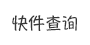
<style>
.page{position:relative;width:90px;height:45px;background:#ffffff}
.page>*{position:absolute;margin:0}
.t1{font:16.7px "HannotateSC-W7";color:#383838}
</style>
<div class="page">
<p class="t1" style="left:12px;top:15px;width:65px;height:16px">快件查询</p>
</div>
